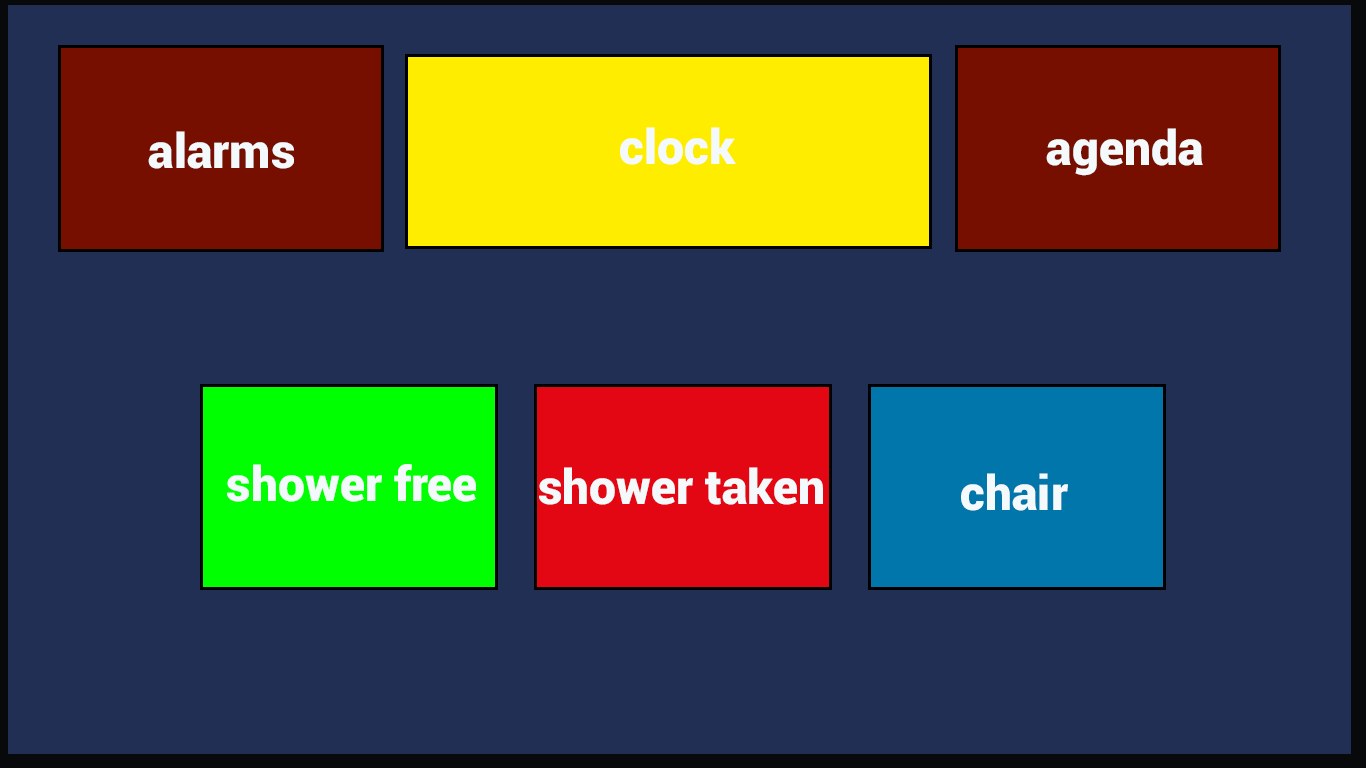
<style>
.page{position:relative;width:1366px;height:768px;background:#202f53}
.page>*{position:absolute;margin:0}
.t1{font:48px "Roboto-Black";color:#f4f9fb}
</style>
<div class="page">
<p class="t1" style="left:148px;top:131px;width:146px;height:38px">alarms</p>
<p class="t1" style="left:620px;top:127px;width:116px;height:38px">clock</p>
<p class="t1" style="left:1046px;top:128px;width:157px;height:48px">agenda</p>
<p class="t1" style="left:227px;top:464px;width:249px;height:38px">shower free</p>
<p class="t1" style="left:539px;top:467px;width:284px;height:38px">shower taken</p>
<p class="t1" style="left:961px;top:473px;width:107px;height:38px">chair</p>
</div>
